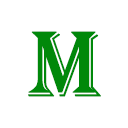
<style>
.page{position:relative;width:128px;height:128px;background:#ffffff}
.page>*{position:absolute;margin:0}
.t1{font:96px "Algerian";color:#00880a;font-weight:bold}
</style>
<div class="page">
<p class="t1" style="left:28px;top:31px;width:73px;height:66px">M</p>
</div>
